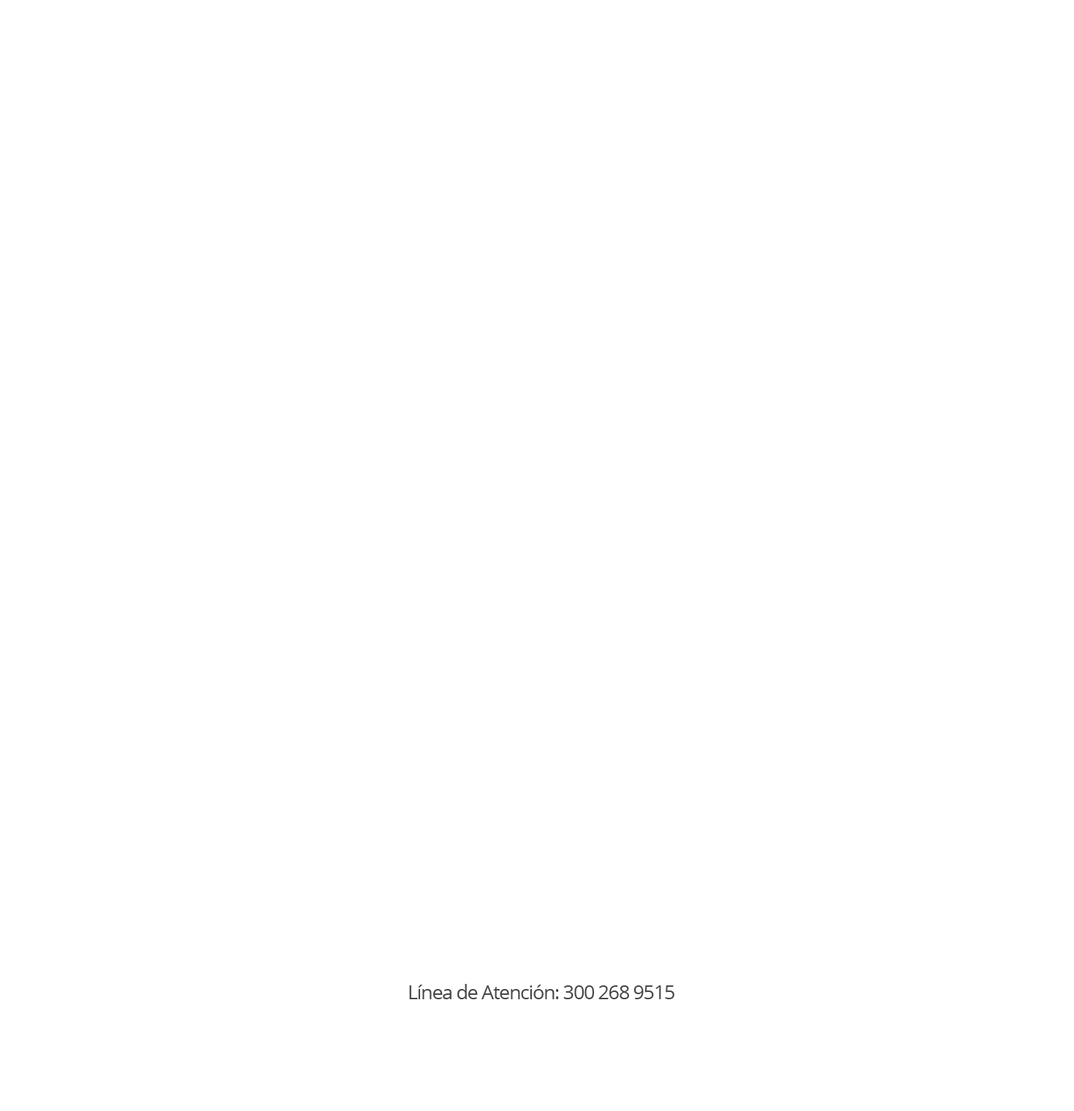
<style>
.page{position:relative;width:1074px;height:1111px;background:#ffffff}
.page>*{position:absolute;margin:0}
.t1{font:19.7px "OpenSans-Regular";letter-spacing:-0.05em;color:#484848}
</style>
<div class="page">
<p class="t1" style="left:409px;top:984px;width:265px;height:15px">Línea de Atención: 300 268 9515</p>
</div>
